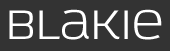
<style>
.page{position:relative;width:170px;height:51px;background:#333333}
.page>*{position:absolute;margin:0}
.t1{font:44.4px "AzoftSans";color:#ffffff}
</style>
<div class="page">
<p class="t1" style="left:9px;top:9px;width:153px;height:31px">Blakie</p>
</div>
